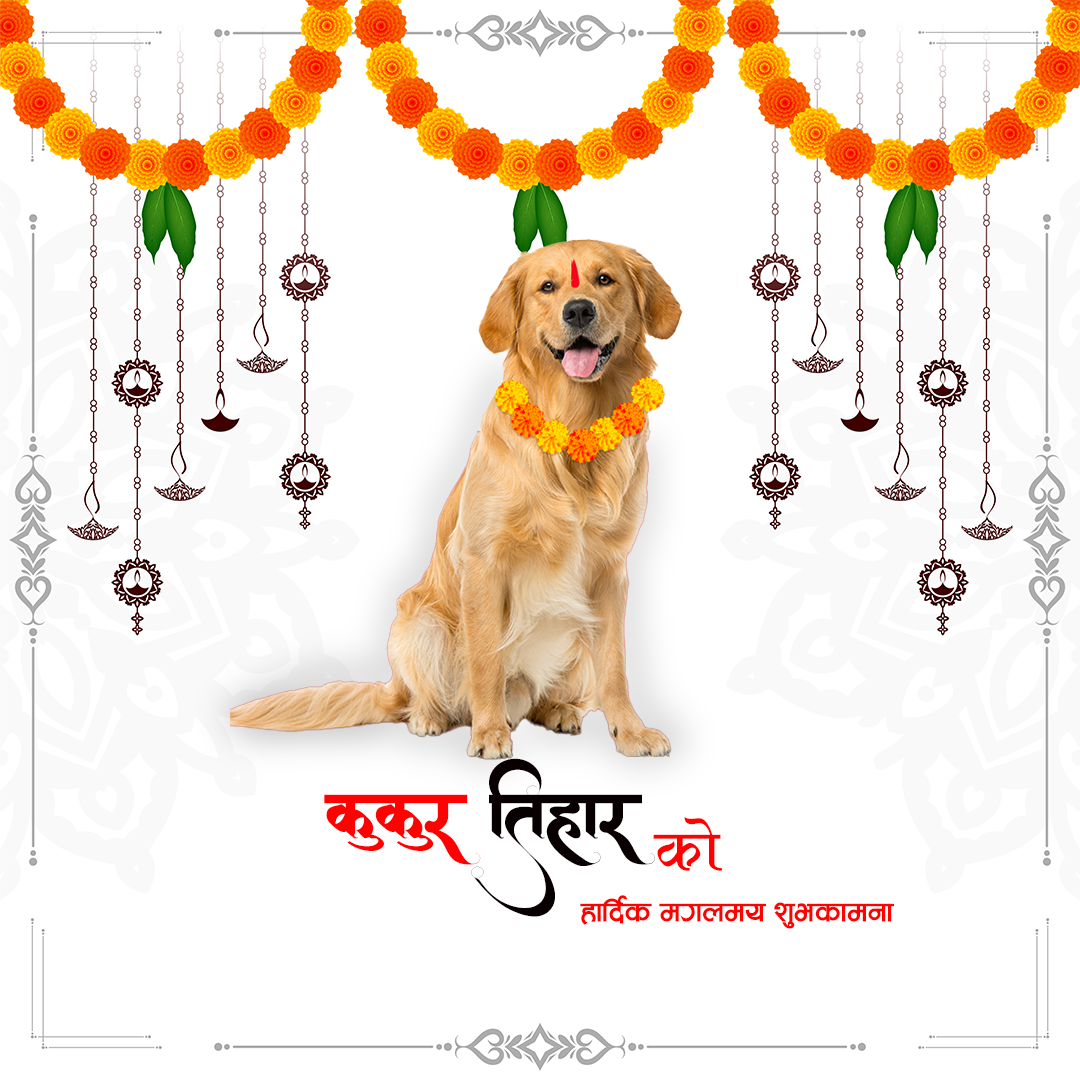
<style>
.page{position:relative;width:1080px;height:1080px;background:#ffffff}
.page>*{position:absolute;margin:0}
.t1{font:65.2px "AMSAakash";color:#080000;scale:1.11 1}
.t2{font:65.2px "AMSAakash";color:#ff0101;scale:1.11 1}
.t3{font:72px "Aakar";color:#ff0101}
.t4{font:36px "AakritiBold";color:#ff0101}
</style>
<div class="page">
<p class="t1" style="left:324px;top:758px;width:331px;height:159px;text-align:center"><span class="t2">kukur </span>itahar</p>
<p class="t3" style="left:653px;top:817px;width:69px;height:54px">sf]</p>
<p class="t4" style="left:580px;top:895px;width:314px;height:34px">xflb{s dundo z'esfdgf</p>
</div>
